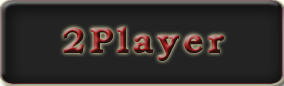
<style>
.page{position:relative;width:284px;height:86px;background:#232323}
.page>*{position:absolute;margin:0}
.t1{font:36px "BookmanOldStyle-Bold";letter-spacing:0.1em}
</style>
<div class="page">
<p class="t1" style="left:63px;top:27px;width:162px;height:34px">2Player</p>
</div>
